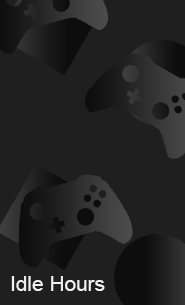
<style>
.page{position:relative;width:185px;height:305px;background:#1f1f1f}
.page>*{position:absolute;margin:0}
.t1{font:20.8px "ArialMT";color:#f1f1f1}
</style>
<div class="page">
<p class="t1" style="left:11px;top:276px;width:94px;height:15px">Idle Hours</p>
</div>
